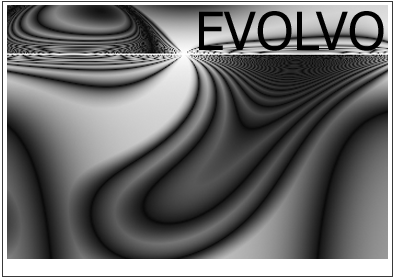
<style>
.page{position:relative;width:394px;height:278px}
.page>*{position:absolute;margin:0}
.t1{font:52.7px "Tahoma";color:#000000}
</style>
<div class="page">
<p class="t1" style="left:199px;top:11px;width:185px;height:40px">EVOLVO</p>
</div>
